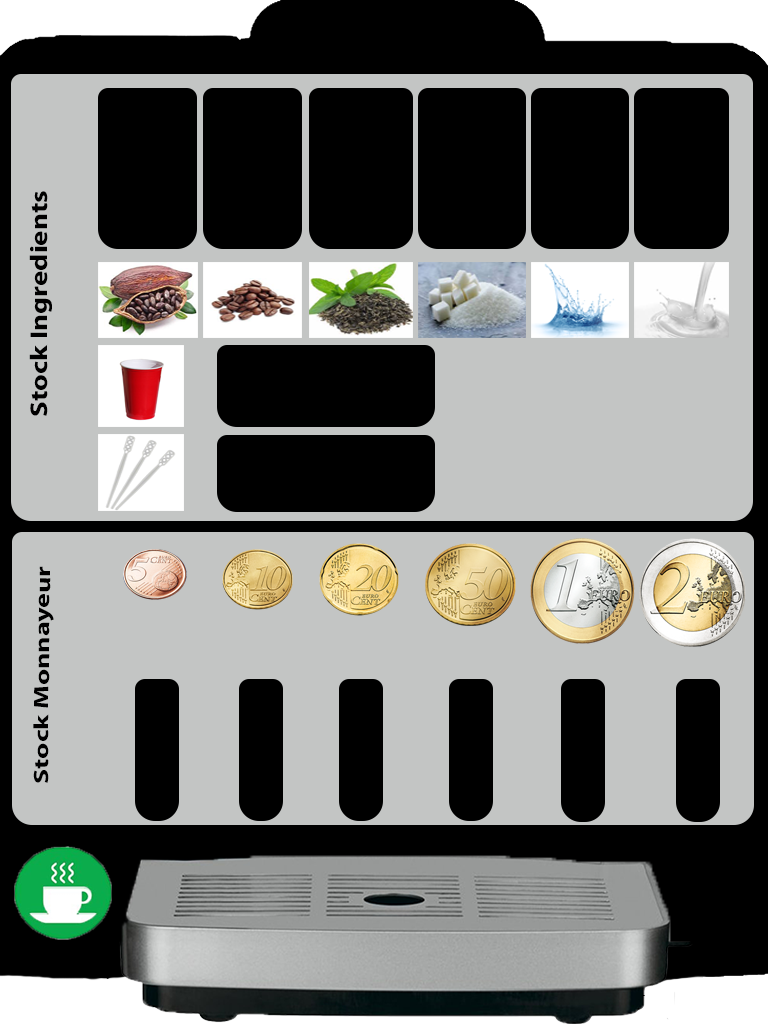
<style>
.page{position:relative;width:768px;height:1024px;background:#c3c5c4}
.page>*{position:absolute;margin:0}
.t1{font:24.3px "MyriadPro-Bold";color:#000000;scale:1.19 1}
.t2{font:20.9px "MyriadPro-Bold";color:#000000;scale:1.34 1}
</style>
<div class="page">
<p class="t1" style="left:29px;top:191px;width:23px;height:225px;rotate:-90deg">Stock Ingredients</p>
<p class="t2" style="left:33px;top:566px;width:21px;height:217px;rotate:-89deg">Stock Monnayeur</p>
</div>
